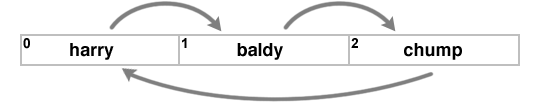
<style>
.page{position:relative;width:540px;height:102px;background:#ffffff}
.page>*{position:absolute;margin:0}
.t1{font:14px "Arial-BoldMT";color:#000000}
.t2{font:18px "Helvetica-Bold";color:#000000}
</style>
<div class="page">
<p class="t1" style="left:23px;top:38px;width:7px;height:11px">0</p>
<p class="t1" style="left:182px;top:38px;width:5px;height:10px">1</p>
<p class="t1" style="left:351px;top:38px;width:7px;height:10px">2</p>
<p class="t2" style="left:70px;top:43px;width:44px;height:17px">harry</p>
<p class="t2" style="left:237px;top:43px;width:46px;height:17px">baldy</p>
<p class="t2" style="left:404px;top:43px;width:58px;height:17px">chump</p>
</div>
